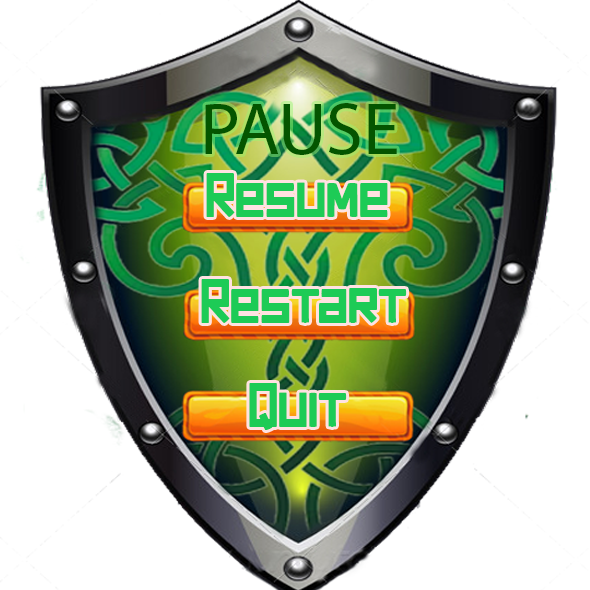
<style>
.page{position:relative;width:590px;height:590px;background:#ffffff}
.page>*{position:absolute;margin:0}
.t1{font:74.1px "MyriadPro-Regular";color:#045500}
.t2{font:62.5px "darkforest";color:#1dcb56}
</style>
<div class="page">
<p class="t1" style="left:205px;top:103px;width:192px;height:52px">PAUSE</p>
<p class="t2" style="left:206px;top:173px;width:182px;height:44px">Resume</p>
<p class="t2" style="left:201px;top:279px;width:206px;height:44px">Restart</p>
<p class="t2" style="left:249px;top:383px;width:98px;height:47px">Quit</p>
</div>
